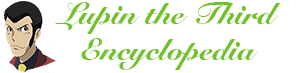
<style>
.page{position:relative;width:300px;height:73px;background:#ffffff}
.page>*{position:absolute;margin:0}
.t1{font:30px "SnellRoundhand-Black";color:#72c02c}
</style>
<div class="page">
<p class="t1" style="left:55px;top:2px;width:226px;height:68px;text-align:center">Lupin the Third<br>Encyclopedia</p>
</div>
